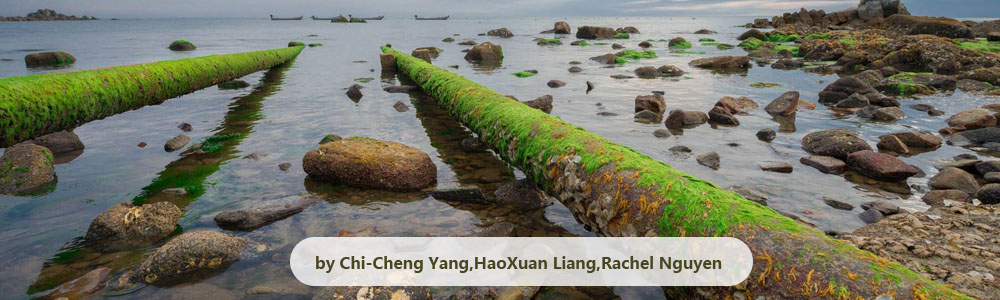
<style>
.page{position:relative;width:1000px;height:300px}
.page>*{position:absolute;margin:0}
.t1{font:16px "MicrosoftYaHei-Bold";color:#494520}
</style>
<div class="page">
<p class="t1" style="left:316px;top:256px;width:406px;height:17px">by Chi-Cheng Yang,HaoXuan Liang,Rachel Nguyen</p>
</div>
